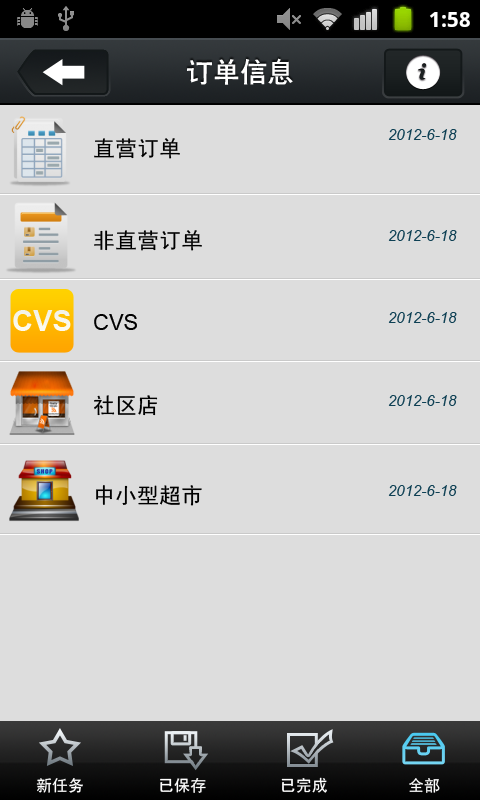
<style>
.page{position:relative;width:480px;height:800px;background:#dddddd}
.page>*{position:absolute;margin:0}
.t1{font:27px "CTCuHeiSJ";color:#ffffff}
.t2{font:15px "Arial-ItalicMT";color:#0e4054}
.t3{font:22px "SimHei";color:#000000}
.t4{font:29.1px "Arial-BoldMT";color:#f8f6ec}
.t5{font:22px "ArialMT";color:#000000}
.t6{font:16px "SimHei";color:#ffffff}
</style>
<div class="page">
<p class="t1" style="left:187px;top:58px;width:106px;height:27px">订单信息</p>
<p class="t2" style="left:388px;top:129px;width:69px;height:11px">2012-6-18</p>
<p class="t3" style="left:94px;top:138px;width:86px;height:21px">直营订单</p>
<p class="t3" style="left:94px;top:230px;width:108px;height:21px">非直营订单</p>
<p class="t2" style="left:388px;top:230px;width:69px;height:11px">2012-6-18</p>
<p class="t4" style="left:13px;top:310px;width:58px;height:21px">CVS</p>
<p class="t5" style="left:94px;top:314px;width:43px;height:16px">CVS</p>
<p class="t2" style="left:388px;top:312px;width:69px;height:11px">2012-6-18</p>
<p class="t3" style="left:94px;top:395px;width:64px;height:21px">社区店</p>
<p class="t2" style="left:388px;top:395px;width:69px;height:11px">2012-6-18</p>
<p class="t3" style="left:96px;top:485px;width:106px;height:21px">中小型超市</p>
<p class="t2" style="left:388px;top:485px;width:69px;height:11px">2012-6-18</p>
<p class="t6" style="left:36px;top:778px;width:47px;height:15px">新任务</p>
<p class="t6" style="left:160px;top:778px;width:46px;height:15px">已保存</p>
<p class="t6" style="left:281px;top:777px;width:46px;height:16px">已完成</p>
<p class="t6" style="left:409px;top:778px;width:31px;height:15px">全部</p>
</div>
